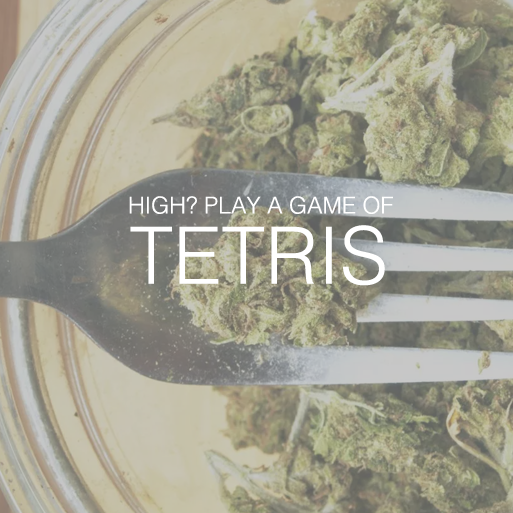
<style>
.page{position:relative;width:513px;height:513px}
.page>*{position:absolute;margin:0}
.t1{font:23.2px "Helvetica-Light";color:#ffffff}
.t2{font:78.9px "Helvetica-Light";color:#ffffff}
</style>
<div class="page">
<p class="t1" style="left:129px;top:196px;width:264px;height:18px">HIGH? PLAY A GAME OF</p>
<p class="t2" style="left:130px;top:225px;width:255px;height:61px">TETRIS</p>
</div>
